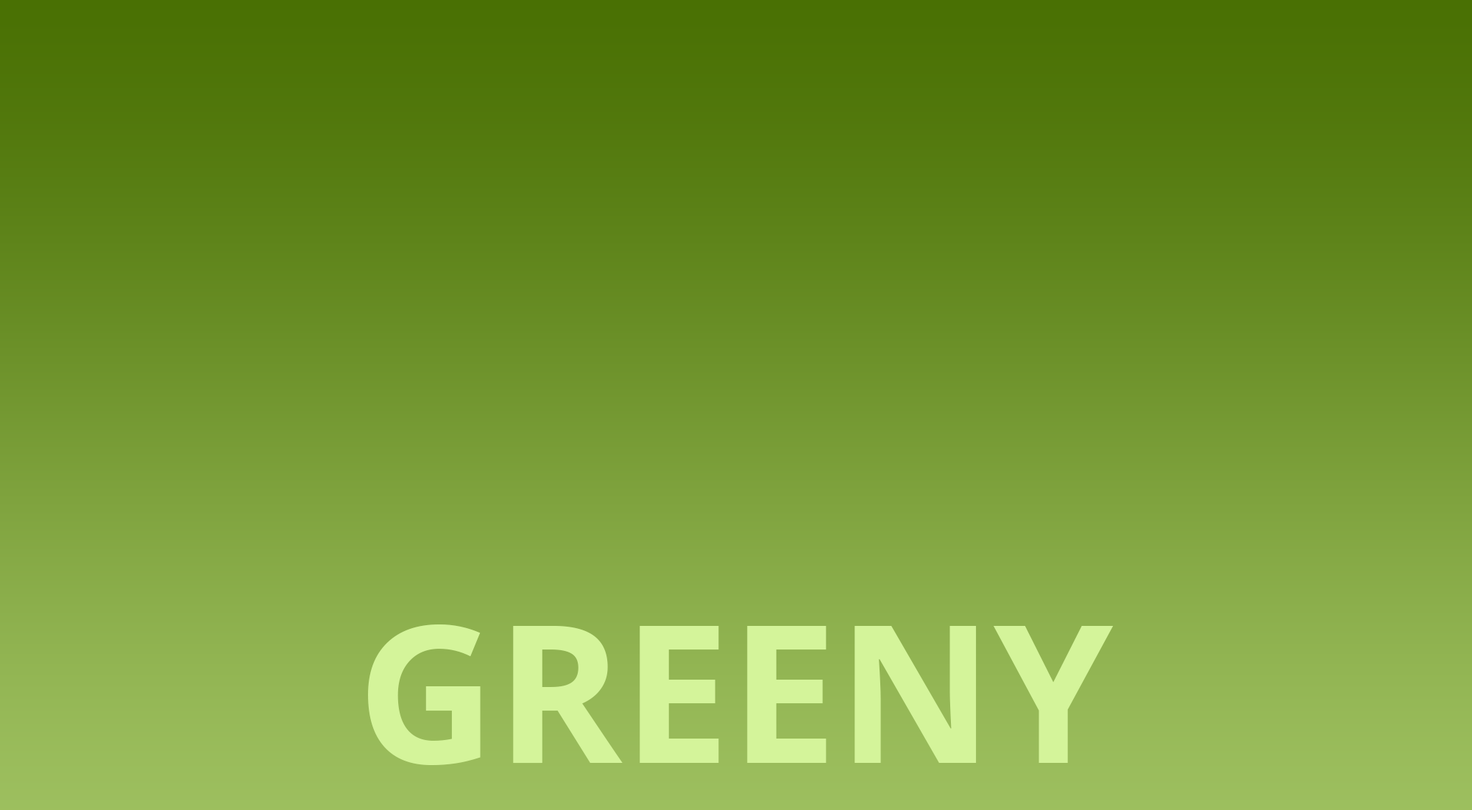
<style>
.page{position:relative;width:1472px;height:810px}
.page>*{position:absolute;margin:0}
.t1{font:191.7px "OpenSans-Bold";color:#d4f49a;text-transform:uppercase}
</style>
<div class="page">
<p class="t1" style="left:368px;top:624px;width:746px;height:141px">GREENY</p>
</div>
